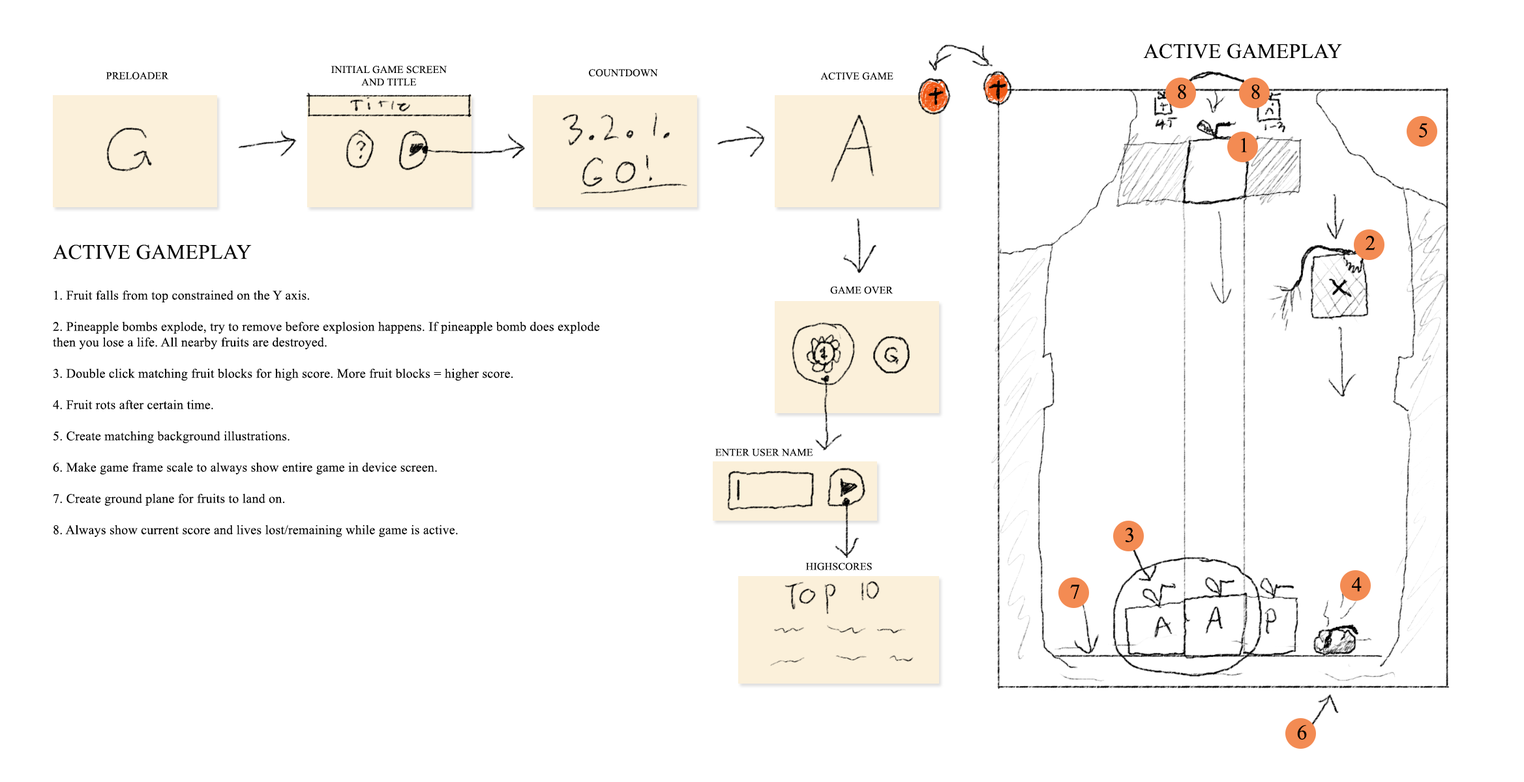
<style>
.page{position:relative;width:1524px;height:782px;background:#ffffff}
.page>*{position:absolute;margin:0}
.t1{font:20.9px "TimesNewRomanPSMT";letter-spacing:0.01em;color:#000000}
.t2{font:10.4px "TimesNewRomanPSMT";letter-spacing:0.01em;color:#000000}
.t3{font:13px "TimesNewRomanPSMT";letter-spacing:0.01em;color:#000000}
</style>
<div class="page">
<p class="t1" style="left:1143px;top:44px;width:199px;height:15px">ACTIVE GAMEPLAY</p>
<p class="t2" style="left:331px;top:66px;width:116px;height:20px;text-align:center">INITIAL GAME SCREEN<br>AND TITLE</p>
<p class="t2" style="left:106px;top:72px;width:63px;height:8px">PRELOADER</p>
<p class="t2" style="left:589px;top:69px;width:69px;height:8px">COUNTDOWN</p>
<p class="t2" style="left:820px;top:72px;width:73px;height:8px">ACTIVE GAME</p>
<p class="t1" style="left:1178px;top:84px;width:8px;height:15px">8</p>
<p class="t1" style="left:1251px;top:84px;width:9px;height:15px">8</p>
<p class="t1" style="left:1419px;top:123px;width:8px;height:15px">5</p>
<p class="t1" style="left:1241px;top:138px;width:6px;height:15px">1</p>
<p class="t3" style="left:53px;top:245px;width:547px;height:292px"><span class="t1">ACTIVE GAMEPLAY<br><br></span>1. Fruit falls from top constrained on the Y axis.<br><br>2. Pineapple bombs explode, try to remove before explosion happens. If pineapple bomb does explode<br>then you lose a life. All nearby fruits are destroyed.<br><br>3. Double click matching fruit blocks for high score. More fruit blocks = higher score.<br><br>4. Fruit rots after certain time.<br><br>5. Create matching background illustrations.<br><br>6. Make game frame scale to always show entire game in device screen.<br><br>7. Create ground plane for fruits to land on.<br><br>8. Always show current score and lives lost/remaining while game is active.</p>
<p class="t1" style="left:1365px;top:235px;width:10px;height:15px">2</p>
<p class="t2" style="left:830px;top:286px;width:63px;height:8px">GAME OVER</p>
<p class="t2" style="left:715px;top:449px;width:98px;height:7px">ENTER USER NAME</p>
<p class="t1" style="left:1125px;top:528px;width:8px;height:15px">3</p>
<p class="t2" style="left:805px;top:563px;width:67px;height:8px">HIGHSCORES</p>
<p class="t1" style="left:1352px;top:577px;width:10px;height:15px">4</p>
<p class="t1" style="left:1070px;top:585px;width:10px;height:14px">7</p>
<p class="t1" style="left:1297px;top:725px;width:10px;height:15px">6</p>
</div>
